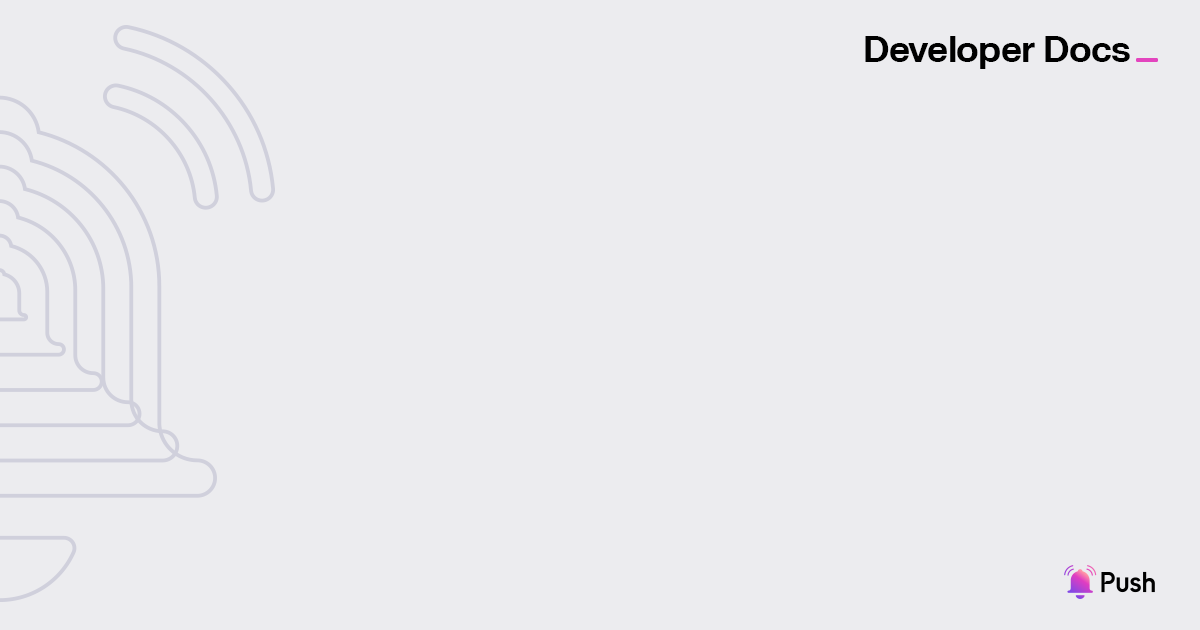
<style>
.page{position:relative;width:1200px;height:630px;background:#ececef}
.page>*{position:absolute;margin:0}
.t1{font:36px "FKGroteskNeue-Bold";letter-spacing:-0.02em;color:#000000}
</style>
<div class="page">
<p class="t1" style="left:865px;top:36px;width:265px;height:33px">Developer Docs</p>
</div>
